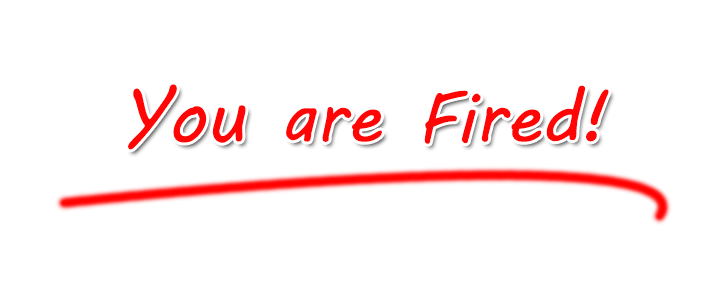
<style>
.page{position:relative;width:720px;height:300px;background:#ffffff}
.page>*{position:absolute;margin:0}
.t1{font:72px "MVBoli";color:#ff0000}
</style>
<div class="page">
<p class="t1" style="left:128px;top:84px;width:481px;height:66px">You are Fired!</p>
</div>
